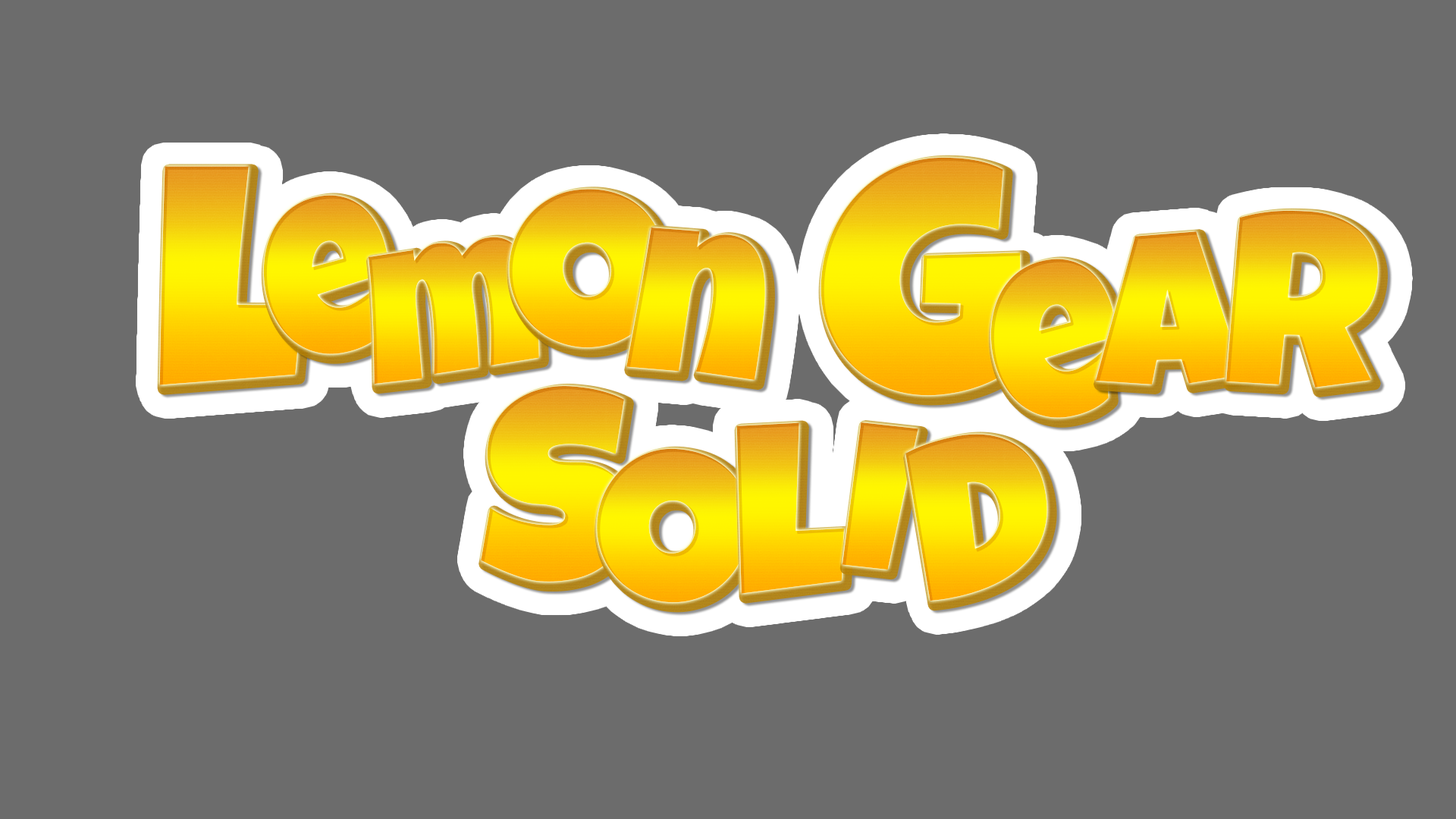
<style>
.page{position:relative;width:1456px;height:819px;background:#6c6c6c}
.page>*{position:absolute;margin:0}
.t1{font:322.6px "LuckiestGuy-Regular";letter-spacing:0.025em}
.t2{font:220px "LuckiestGuy-Regular";letter-spacing:0.025em}
.t3{font:247.7px "LuckiestGuy-Regular";letter-spacing:0.025em}
.t4{font:246.5px "LuckiestGuy-Regular";letter-spacing:0.025em}
.t5{font:205.7px "LuckiestGuy-Regular";letter-spacing:0.025em}
.t6{font:190.9px "LuckiestGuy-Regular";letter-spacing:0.025em}
.t7{font:276.4px "LuckiestGuy-Regular";letter-spacing:0.025em}
.t8{font:240.1px "LuckiestGuy-Regular";letter-spacing:0.025em}
.t9{font:216.4px "LuckiestGuy-Regular";letter-spacing:0.025em}
.t10{font:234.9px "LuckiestGuy-Regular";letter-spacing:0.025em}
</style>
<div class="page">
<p class="t1" style="left:821px;top:157px;width:201px;height:239px">G</p>
<p class="t1" style="left:159px;top:166px;width:144px;height:219px">L</p>
<p class="t2" style="left:263px;top:195px;width:127px;height:159px;rotate:-10deg">e</p>
<p class="t3" style="left:509px;top:189px;width:157px;height:159px;rotate:-7deg">o</p>
<p class="t4" style="left:1226px;top:210px;width:152px;height:178px;rotate:3deg">r</p>
<p class="t5" style="left:626px;top:227px;width:139px;height:153px;rotate:7deg">n</p>
<p class="t2" style="left:1096px;top:231px;width:148px;height:153px;rotate:-2deg">a</p>
<p class="t6" style="left:368px;top:237px;width:171px;height:147px;rotate:-7deg">m</p>
<p class="t2" style="left:990px;top:259px;width:127px;height:159px;rotate:-10deg">e</p>
<p class="t7" style="left:481px;top:386px;width:148px;height:196px;rotate:3deg">s</p>
<p class="t8" style="left:736px;top:422px;width:109px;height:172px;rotate:-3deg">l</p>
<p class="t9" style="left:842px;top:422px;width:76px;height:148px;rotate:9deg">i</p>
<p class="t10" style="left:905px;top:434px;width:142px;height:167px;rotate:-11deg">d</p>
<p class="t8" style="left:597px;top:448px;width:152px;height:155px;rotate:3deg">o</p>
</div>
